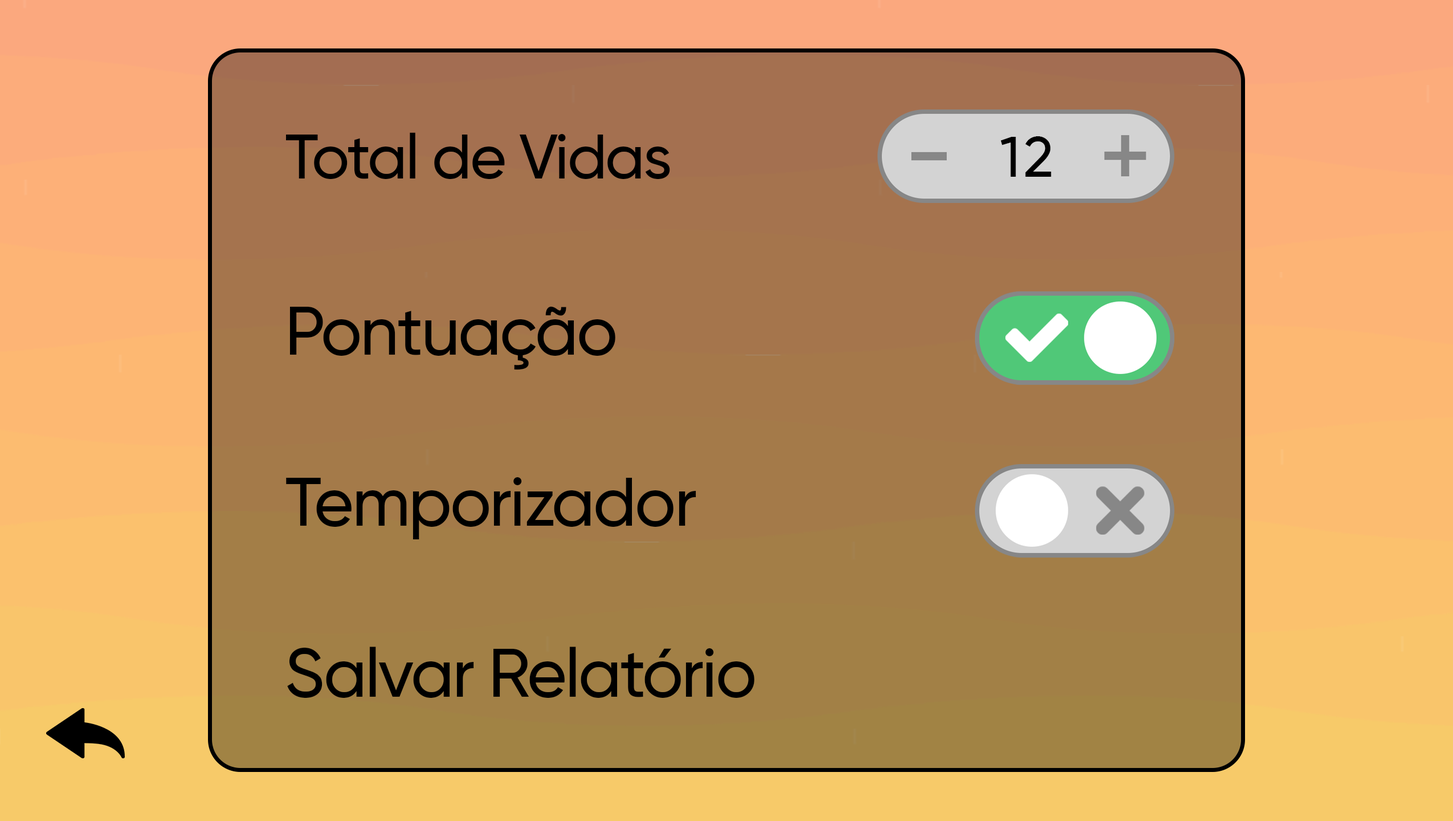
<style>
.page{position:relative;width:1453px;height:821px}
.page>*{position:absolute;margin:0}
.t1{font:62.7px "Gilroy-Medium";letter-spacing:-0.025em;color:#000000}
.t2{font:57px "Gilroy-Medium";letter-spacing:0.05em;color:#000000}
.t3{font:68.4px "Gilroy-Medium";letter-spacing:-0.025em;color:#000000}
</style>
<div class="page">
<p class="t1" style="left:285px;top:132px;width:385px;height:47px">Total de Vidas</p>
<p class="t2" style="left:1001px;top:136px;width:50px;height:41px">12</p>
<p class="t3" style="left:289px;top:306px;width:326px;height:64px">Pontuação</p>
<p class="t3" style="left:286px;top:477px;width:410px;height:62px">Temporizador</p>
<p class="t3" style="left:287px;top:646px;width:467px;height:52px">Salvar Relatório</p>
</div>
